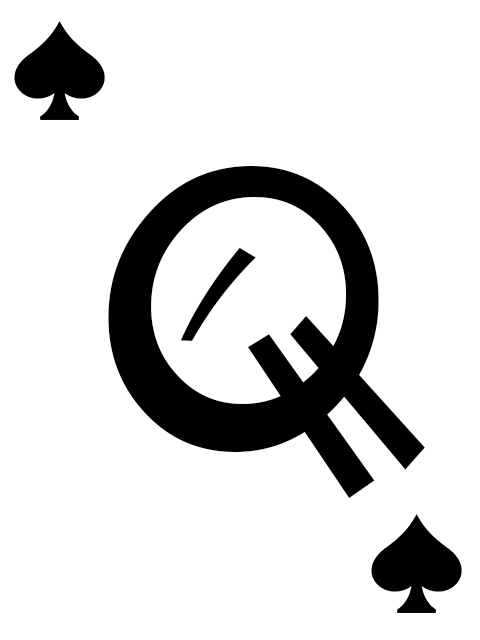
<style>
.page{position:relative;width:480px;height:640px;background:#ffffff}
.page>*{position:absolute;margin:0}
.t1{font:386.3px "Jokerman-Regular";color:#000000}
</style>
<div class="page">
<p class="t1" style="left:108px;top:166px;width:317px;height:332px">Q</p>
</div>
